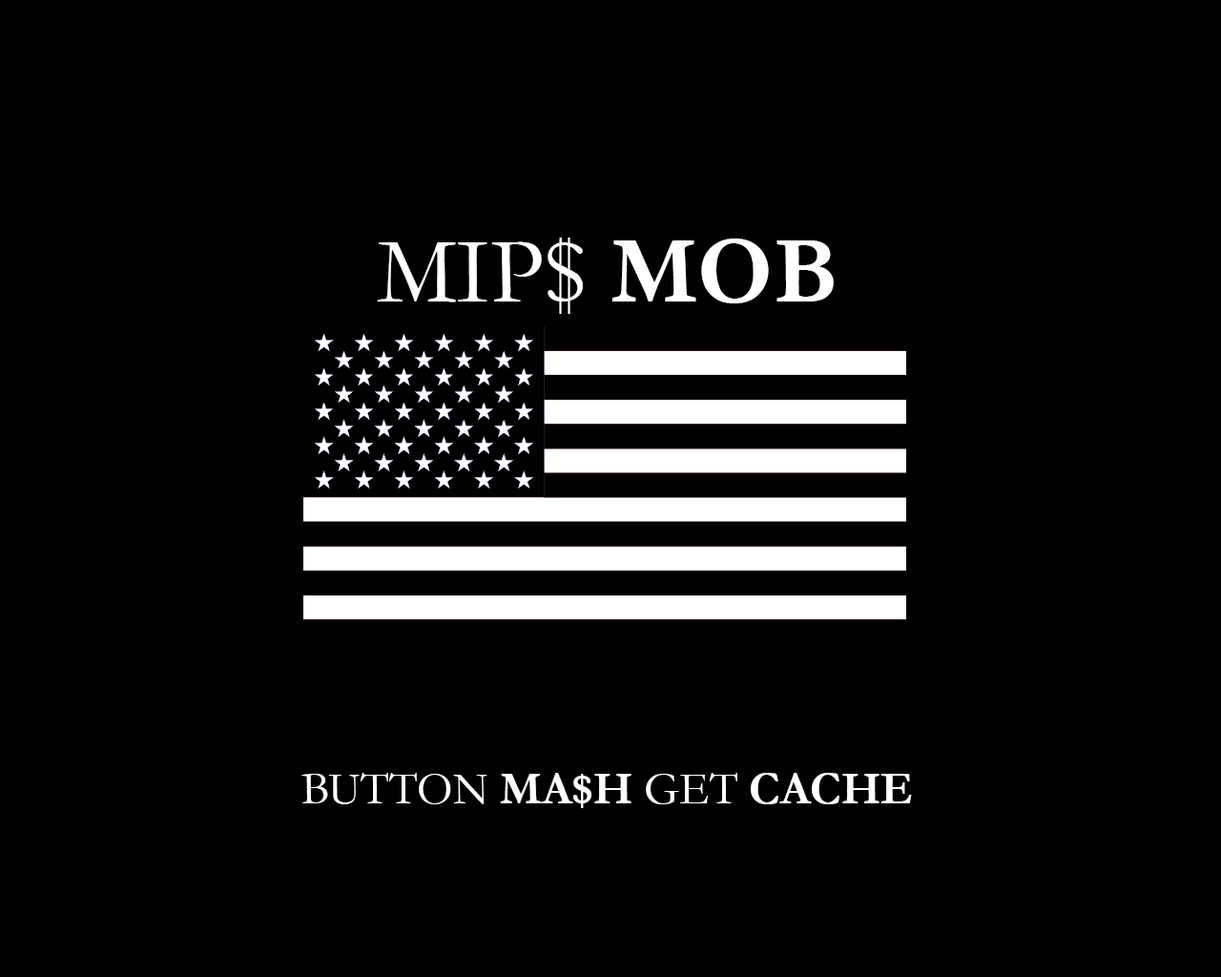
<style>
.page{position:relative;width:1221px;height:977px;background:#000000}
.page>*{position:absolute;margin:0}
.t1{font:95.4px "Garamond";color:#ffffff}
.t2{font:95.4px "Garamond-Bold";color:#ffffff}
.t3{font:45.8px "Garamond";color:#ffffff}
.t4{font:45.8px "Garamond-Bold";color:#ffffff}
</style>
<div class="page">
<p class="t1" style="left:377px;top:237px;width:457px;height:77px">MIP$ <span class="t2">MOB</span></p>
<p class="t3" style="left:301px;top:773px;width:611px;height:35px">BUTTON <span class="t4">MA$H</span> GET <span class="t4">CACHE</span></p>
</div>
